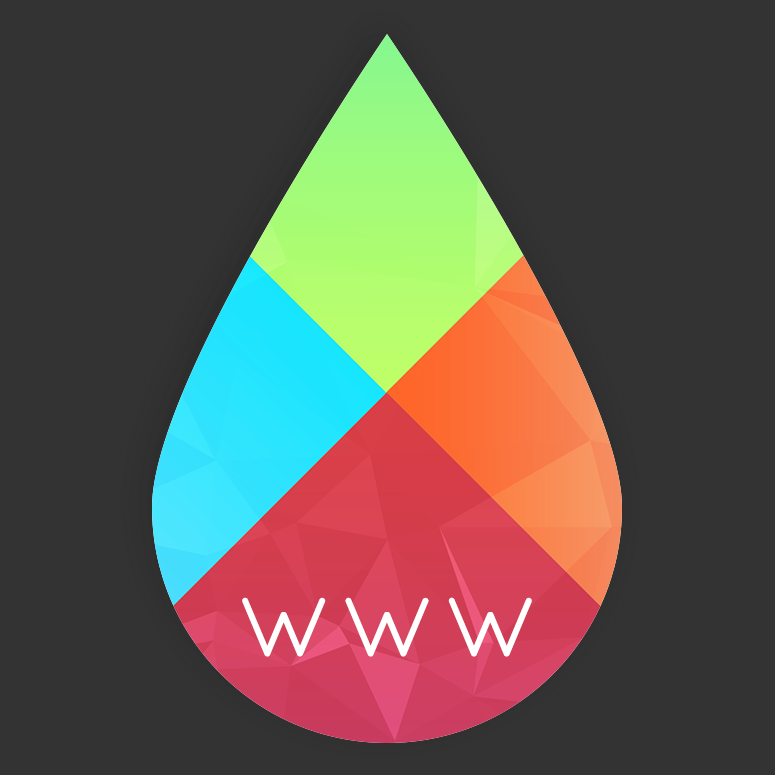
<style>
.page{position:relative;width:775px;height:775px;background:#333333}
.page>*{position:absolute;margin:0}
.t1{font:120px "Quicksand-Regular";color:#ffffff}
</style>
<div class="page">
<p class="t1" style="left:242px;top:597px;width:290px;height:60px">www</p>
</div>
